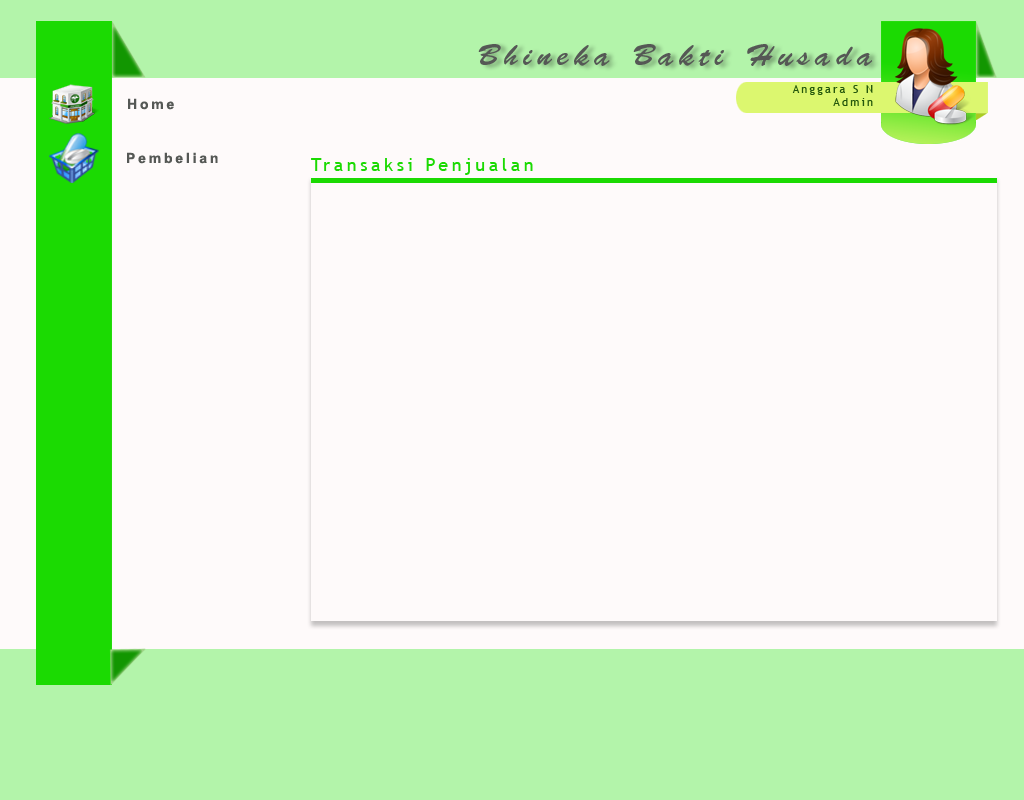
<style>
.page{position:relative;width:1024px;height:800px;background:#fefafa}
.page>*{position:absolute;margin:0}
.t1{font:30px "BrushScriptStd";letter-spacing:0.2em;color:#555855}
.t2{font:11px "TrebuchetMS";letter-spacing:0.2em;color:#25580c}
.t3{font:14px "Arial-BoldMT";letter-spacing:0.2em;color:#555855}
.t4{font:18px "TrebuchetMS";letter-spacing:0.2em;color:#1bda02}
</style>
<div class="page">
<p class="t1" style="left:478px;top:44px;width:395px;height:22px">Bhineka Bakti Husada</p>
<p class="t2" style="left:792px;top:85px;width:81px;height:21px;text-align:right">Anggara S N<br>Admin</p>
<p class="t3" style="left:128px;top:98px;width:46px;height:12px">Home</p>
<p class="t3" style="left:127px;top:152px;width:91px;height:12px">Pembelian</p>
<p class="t4" style="left:311px;top:158px;width:222px;height:17px">Transaksi Penjualan</p>
</div>
